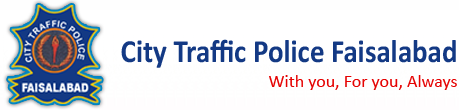
<style>
.page{position:relative;width:459px;height:110px;background:#ffffff}
.page>*{position:absolute;margin:0}
.t1{font:32.5px "Calibri-Bold";color:#133984;scale:0.89 1}
.t2{font:18px "Calibri";color:#e50202}
</style>
<div class="page">
<p class="t1" style="left:121px;top:39px;width:335px;height:29px">City Traffic Police Faisalabad</p>
<p class="t2" style="left:269px;top:75px;width:188px;height:15px">With you, For you, Always</p>
</div>
